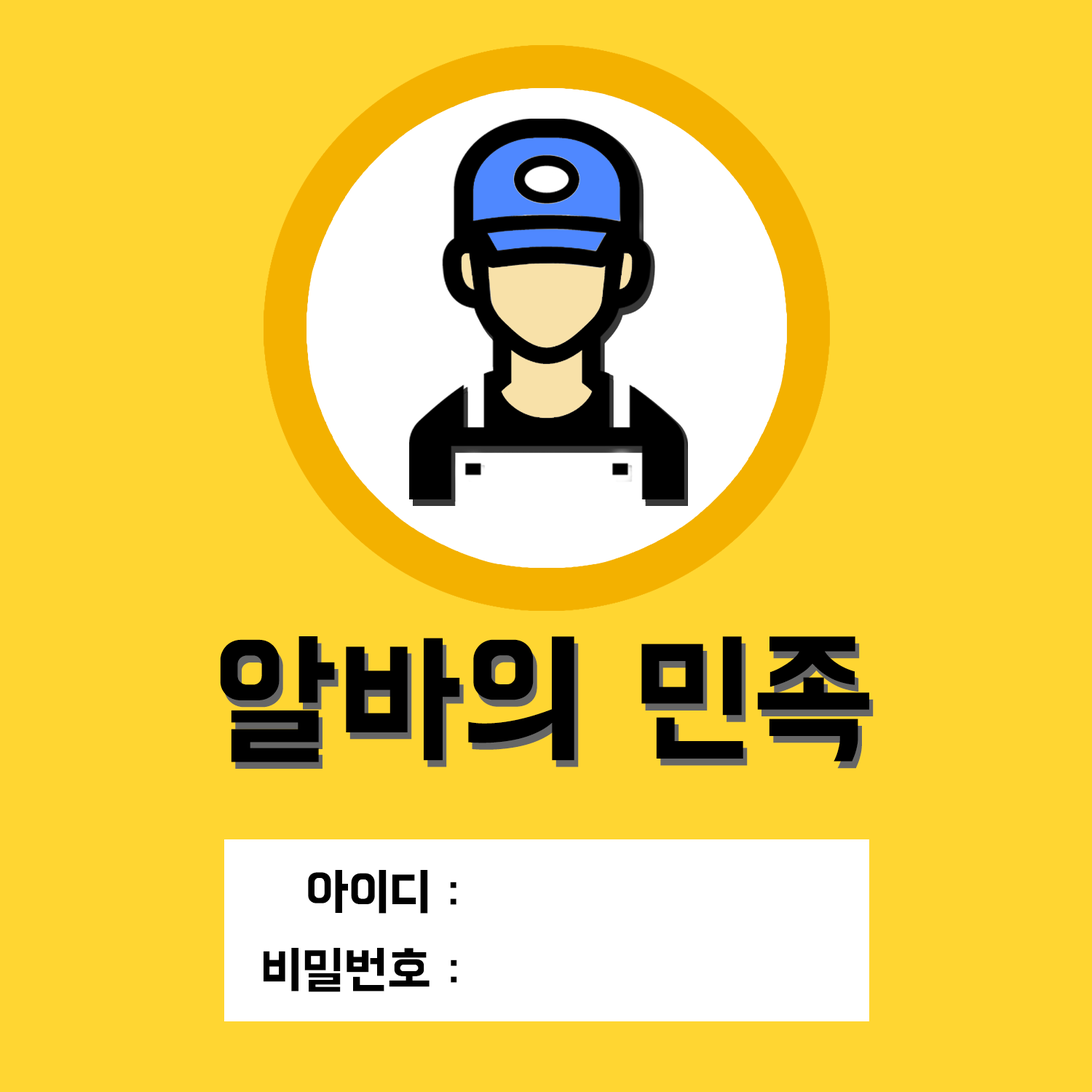
<style>
.page{position:relative;width:1092px;height:1092px;background:#ffd632}
.page>*{position:absolute;margin:0}
.t1{font:146.7px "BMHANNA11yrsold";color:#000000}
.t2{font:146.7px "BMHANNA11yrsold"}
.t3{font:51.4px "BMHANNA11yrsold";color:#000000}
</style>
<div class="page">
<p class="t1" style="left:220px;top:636px;width:649px;height:126px">알바의 민족</p>
<p class="t2" style="left:224px;top:643px;width:650px;height:126px">알바의 민족</p>
<p class="t3" style="left:308px;top:870px;width:148px;height:44px">아이디 :</p>
<p class="t3" style="left:264px;top:948px;width:193px;height:44px">비밀번호 :</p>
</div>
